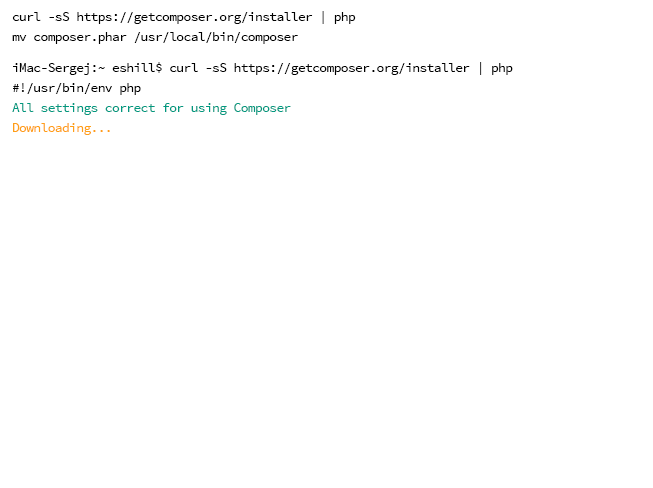
<style>
.page{position:relative;width:653px;height:488px;background:#ffffff}
.page>*{position:absolute;margin:0}
.t1{font:13px/20px "SourceCodePro-Regular";letter-spacing:-0.05em;color:#000000}
.t2{font:13px/20px "SourceCodePro-Regular";letter-spacing:-0.05em}
</style>
<div class="page">
<p class="t1" style="left:12px;top:11px;width:344px;height:33px">curl -sS https://getcomposer.org/installer | php<br>mv composer.phar /usr/local/bin/composer</p>
<p class="t2" style="left:12px;top:62px;width:501px;height:133px">iMac-Sergej:~ eshill$ curl -sS https://getcomposer.org/installer | php<br>#!/usr/bin/env php<br>All settings correct for using Composer<br>Downloading...<br><br>Composer successfully installed to: /Users/eshill/composer.phar<br>Use it: php composer.phar</p>
</div>
